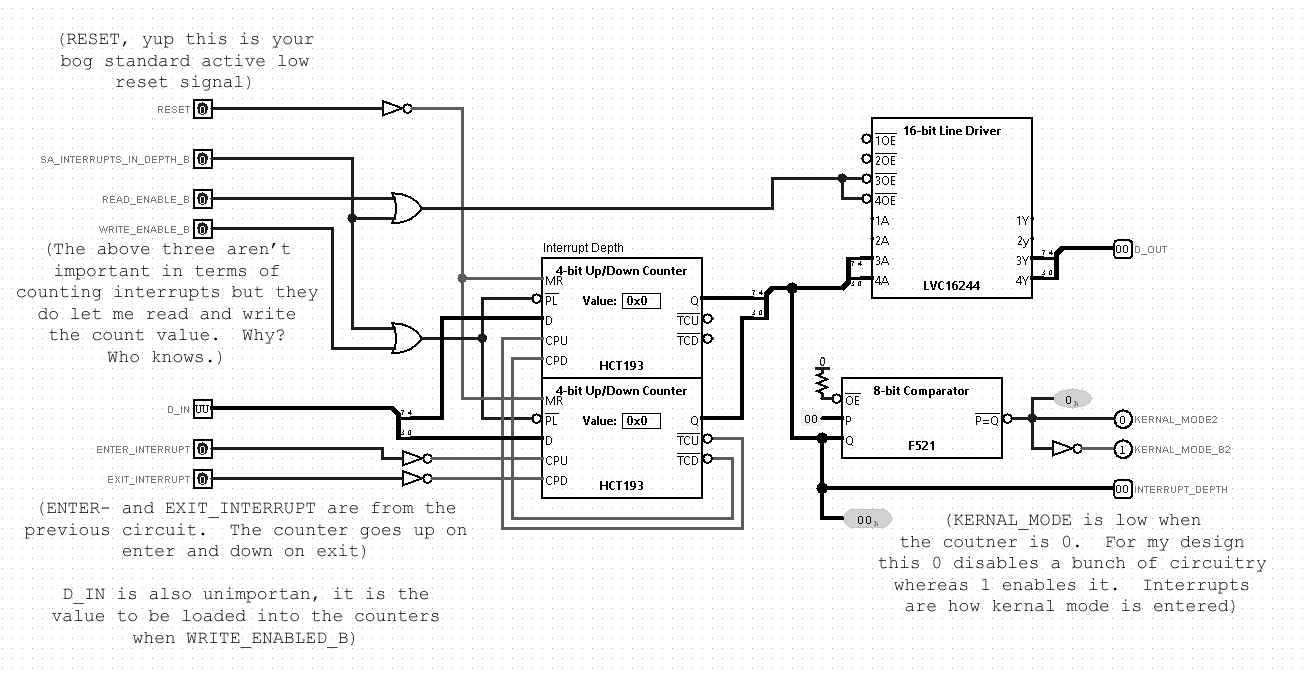
<style>
.page{position:relative;width:1304px;height:676px;background:#ffffff}
.page>*{position:absolute;margin:0}
.t1{font:18px "CourierNewPSMT";color:#000000}
</style>
<div class="page">
<p class="t1" style="left:60px;top:32px;width:254px;height:59px;text-align:center">(RESET, yup this is your<br>bog standard active low<br>reset signal)</p>
<p class="t1" style="left:17px;top:243px;width:301px;height:122px;text-align:center">(The above three aren’t<br>important in terms of<br>counting interrupts but they<br>do let me read and write<br>the count value.  Why?<br>Who knows.)</p>
<p class="t1" style="left:25px;top:502px;width:442px;height:146px;text-align:center">(ENTER- and EXIT_INTERRUPT are from the<br>previous circuit.  The counter goes up on<br>enter and down on exit)<br><br>D_IN is also unimportan, it is the<br>value to be loaded into the counters<br>when WRITE_ENABLED_B)</p>
<p class="t1" style="left:878px;top:513px;width:388px;height:101px;text-align:center">(KERNAL_MODE is low when<br>the coutner is 0.  For my design<br>this 0 disables a bunch of circuitry<br>whereas 1 enables it.  Interrupts<br>are how kernal mode is entered)</p>
</div>
